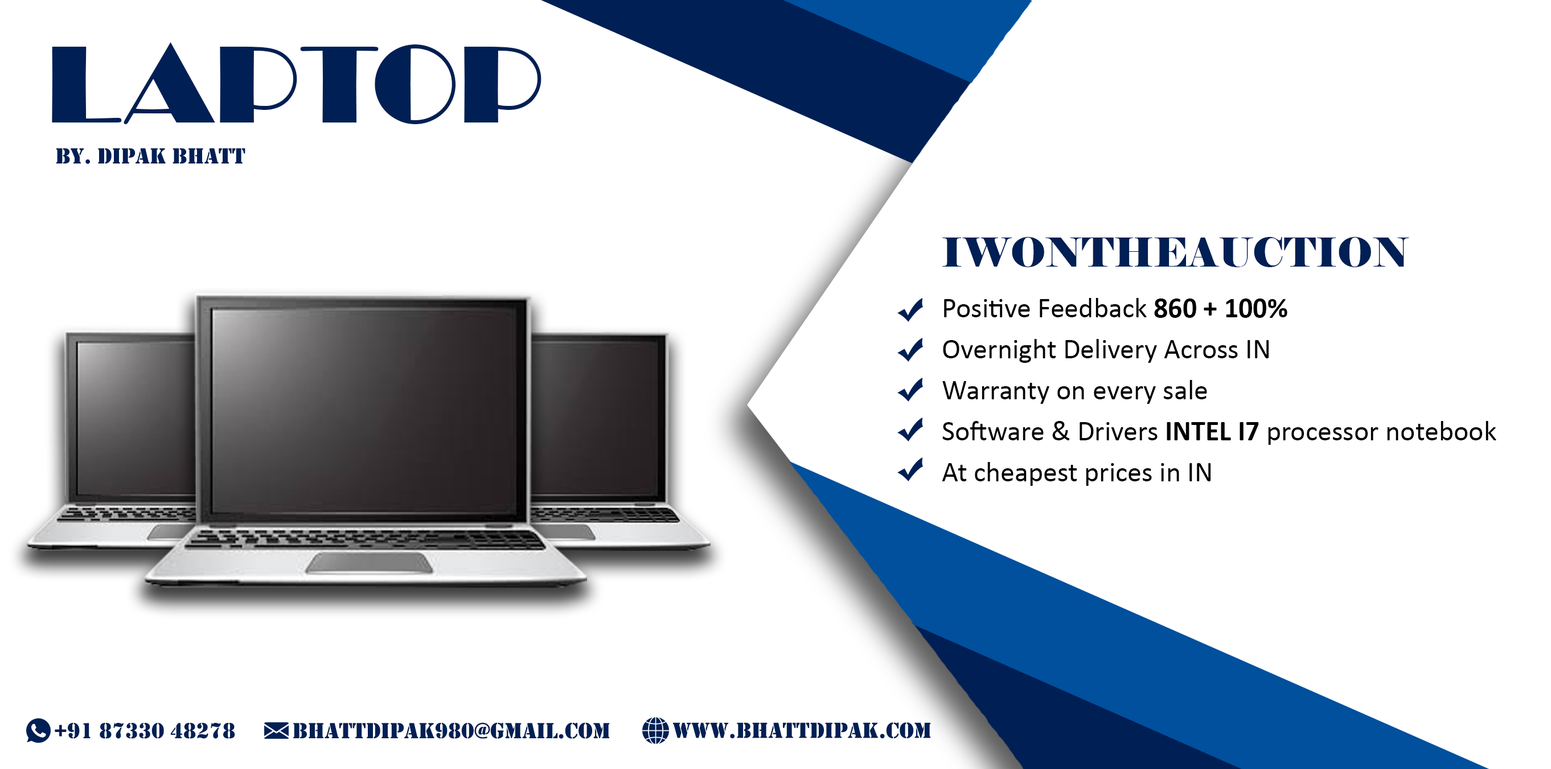
<style>
.page{position:relative;width:1551px;height:769px;background:#ffffff}
.page>*{position:absolute;margin:0}
.t1{font:113.9px "Broadway";color:#001f54}
.t2{font:22.8px "Stencil";color:#001f54}
.t3{font:39.9px "Elephant-Regular";color:#001f54}
.t4{font:28.5px/41px "Calibri";color:#000000}
.t5{font:28.5px/41px "Calibri-Bold";color:#000000}
</style>
<div class="page">
<p class="t1" style="left:52px;top:42px;width:490px;height:82px">LAPTOP</p>
<p class="t2" style="left:56px;top:148px;width:189px;height:16px">By. Dipak Bhatt</p>
<p class="t3" style="left:942px;top:237px;width:467px;height:30px">IWONTHEAUCTION</p>
<p class="t4" style="left:942px;top:298px;width:554px;height:188px">Positive Feedback <span class="t5">860 + 100%<br></span>Overnight Delivery Across IN<br>Warranty on every sale<br>Software &amp; Drivers <span class="t5">INTEL I7</span> processor notebook<br>At cheapest prices in IN</p>
<p class="t2" style="left:55px;top:723px;width:180px;height:16px">+91 87330 48278</p>
<p class="t2" style="left:293px;top:722px;width:317px;height:17px">bhattdipak980@gmail.com</p>
<p class="t2" style="left:673px;top:722px;width:258px;height:17px">www.bhattdipak.com</p>
</div>
